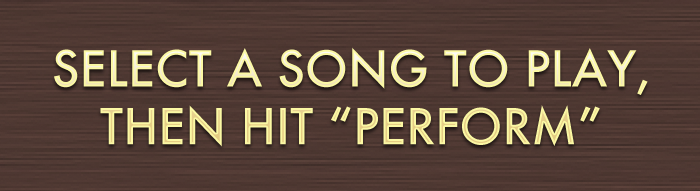
<style>
.page{position:relative;width:700px;height:191px}
.page>*{position:absolute;margin:0}
.t1{font:48px "Futura-Medium"}
</style>
<div class="page">
<p class="t1" style="left:54px;top:47px;width:594px;height:100px;text-align:center">SELECT A SONG TO PLAY,<br>THEN HIT “PERFORM”</p>
</div>
